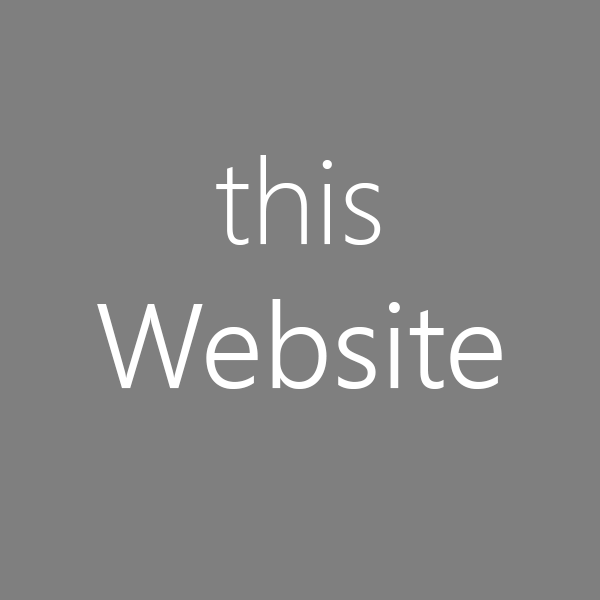
<style>
.page{position:relative;width:600px;height:600px;background:#7f7f7f}
.page>*{position:absolute;margin:0}
.t1{font:120px "SegoeUI-Semilight";color:#ffffff}
.t2{font:120px "SegoeUI-Light";color:#ffffff}
</style>
<div class="page">
<p class="t1" style="left:97px;top:155px;width:405px;height:234px;text-align:center"><span class="t2">this <br></span>Website</p>
</div>
